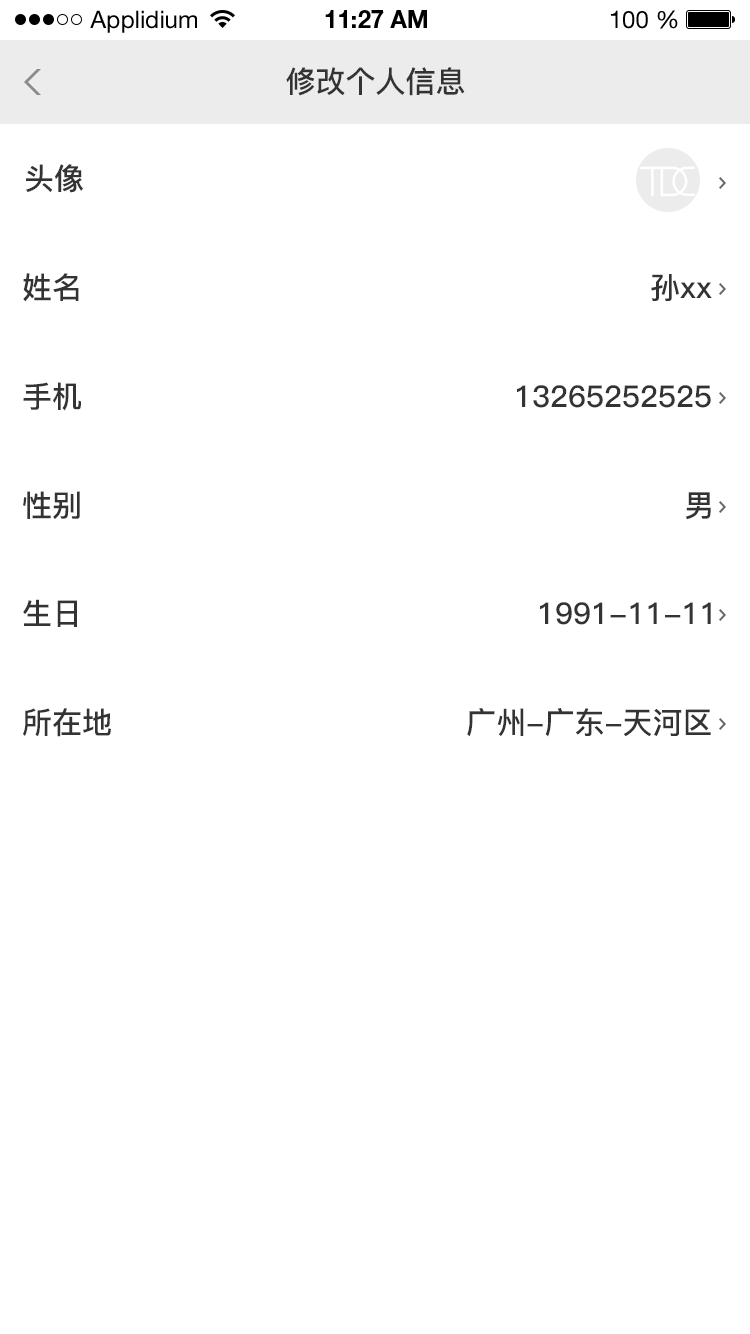
<style>
.page{position:relative;width:750px;height:1334px;background:#ffffff}
.page>*{position:absolute;margin:0}
.t1{font:24px "HelveticaNeueLTStd-Roman";color:#000000}
.t2{font:24px "HelveticaNeueLTStd-Bd";color:#000000}
.t3{font:30px "PingFang-SC-Bold";color:#333333}
</style>
<div class="page">
<p class="t1" style="left:90px;top:10px;width:107px;height:23px">Applidium</p>
<p class="t2" style="left:325px;top:10px;width:102px;height:18px">11:27 AM</p>
<p class="t1" style="left:611px;top:10px;width:67px;height:19px">100 %</p>
<p class="t3" style="left:286px;top:67px;width:179px;height:29px">修改个人信息</p>
<p class="t3" style="left:26px;top:164px;width:57px;height:29px">头像</p>
<p class="t3" style="left:23px;top:273px;width:56px;height:29px">姓名</p>
<p class="t3" style="left:651px;top:274px;width:61px;height:27px">孙xx</p>
<p class="t3" style="left:23px;top:382px;width:58px;height:29px">手机</p>
<p class="t3" style="left:517px;top:385px;width:194px;height:23px">13265252525</p>
<p class="t3" style="left:23px;top:491px;width:57px;height:28px">性别</p>
<p class="t3" style="left:685px;top:492px;width:26px;height:28px">男</p>
<p class="t3" style="left:23px;top:599px;width:54px;height:28px">生日</p>
<p class="t3" style="left:540px;top:602px;width:171px;height:23px">1991-11-11</p>
<p class="t3" style="left:23px;top:708px;width:88px;height:29px">所在地</p>
<p class="t3" style="left:467px;top:708px;width:244px;height:29px">广州-广东-天河区</p>
</div>
